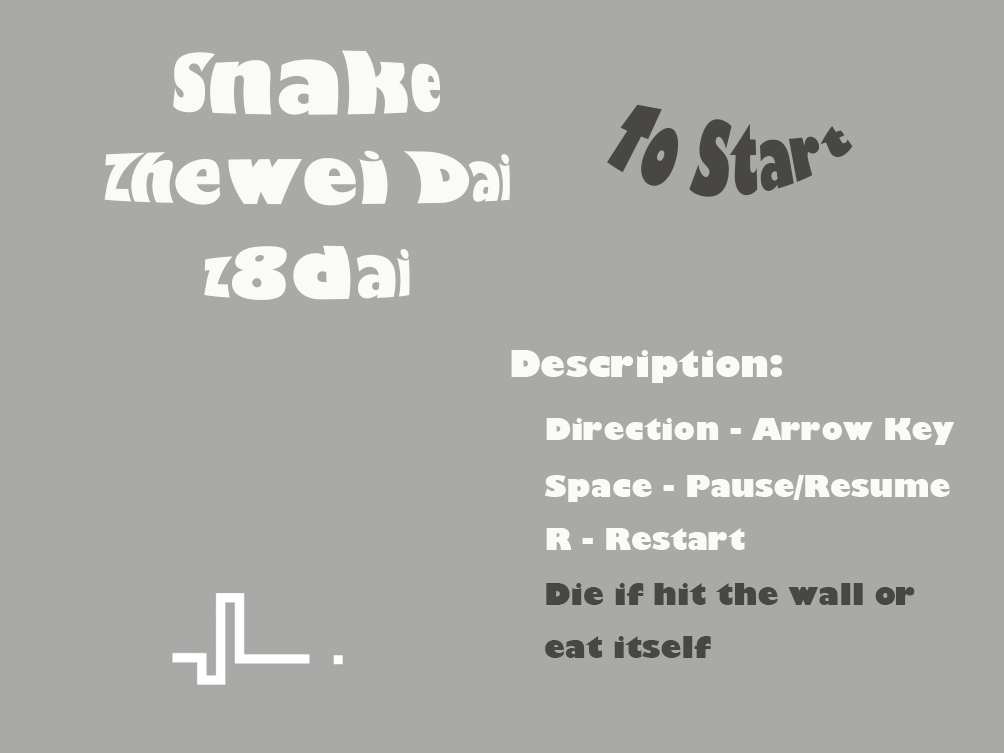
<style>
.page{position:relative;width:1004px;height:753px;background:#a9a9a7}
.page>*{position:absolute;margin:0}
.t1{font:72px "GillSans-UltraBold";color:#fafaf9}
.t2{font:48px "GillSans-UltraBold";color:#484745}
.t3{font:60px "GillSans-UltraBold";color:#fafaf9}
.t4{font:30px "GillSans-UltraBold";color:#fafaf9}
.t5{font:36px "GillSans-UltraBold";color:#fafaf9}
.t6{font:30px "GillSans-UltraBold";color:#484745}
</style>
<div class="page">
<p class="t1" style="left:173px;top:50px;width:267px;height:65px">Snake</p>
<p class="t2" style="left:607px;top:104px;width:246px;height:93px">To Start</p>
<p class="t3" style="left:104px;top:150px;width:406px;height:56px">Zhewei Dai</p>
<p class="t3" style="left:204px;top:245px;width:206px;height:55px">z8dai</p>
<p class="t4" style="left:511px;top:350px;width:444px;height:200px"><span class="t5">Description:<br> </span>Direction - Arrow Key <br> Space - Pause/Resume<br> R - Restart</p>
<p class="t6" style="left:545px;top:583px;width:370px;height:75px">Die if hit the wall or<br>eat itself</p>
</div>
